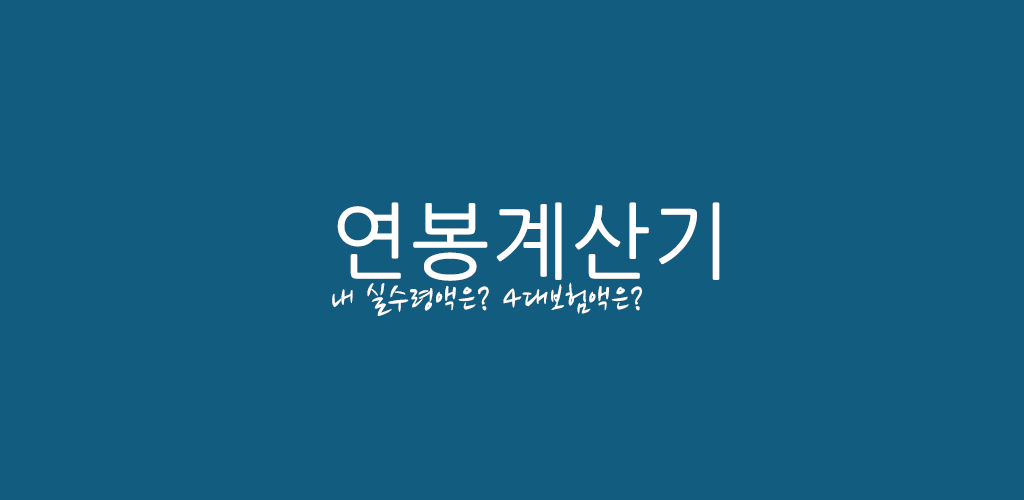
<style>
.page{position:relative;width:1024px;height:500px;background:#125c7f}
.page>*{position:absolute;margin:0}
.t1{font:36px "NanumBrush";color:#ffffff;font-weight:bold}
.t2{font:83px "NanumGothic";color:#ffffff;font-weight:bold}
</style>
<div class="page">
<p class="t1" style="left:332px;top:202px;width:388px;height:114px"><span class="t2">연봉계산기<br></span>내 실수령액은? 4대보험액은?</p>
</div>
